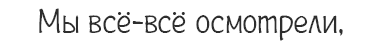
<style>
.page{position:relative;width:382px;height:49px;background:#ffffff}
.page>*{position:absolute;margin:0}
.t1{font:35px "Plainot";color:#2e2e2e}
</style>
<div class="page">
<p class="t1" style="left:39px;top:8px;width:304px;height:33px">Мы всё-всё осмотрели,</p>
</div>
